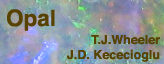
<style>
.page{position:relative;width:164px;height:64px}
.page>*{position:absolute;margin:0}
.t1{font:22.5px "Helvetica-Bold";color:#574201}
.t2{font:12.5px "Helvetica-Bold";color:#574201}
</style>
<div class="page">
<p class="t1" style="left:7px;top:9px;width:48px;height:22px">Opal</p>
<p class="t2" style="left:67px;top:35px;width:93px;height:27px;text-align:right">T.J.Wheeler<br>J.D. Kececioglu</p>
</div>
